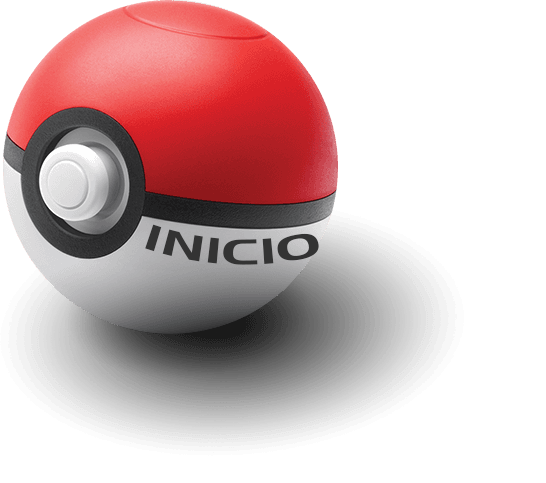
<style>
.page{position:relative;width:546px;height:483px;background:#ffffff}
.page>*{position:absolute;margin:0}
.t1{font:36px "HanzelExtendedNormal";color:#333333}
</style>
<div class="page">
<p class="t1" style="left:145px;top:224px;width:174px;height:41px;rotate:2deg">INICIO</p>
</div>
